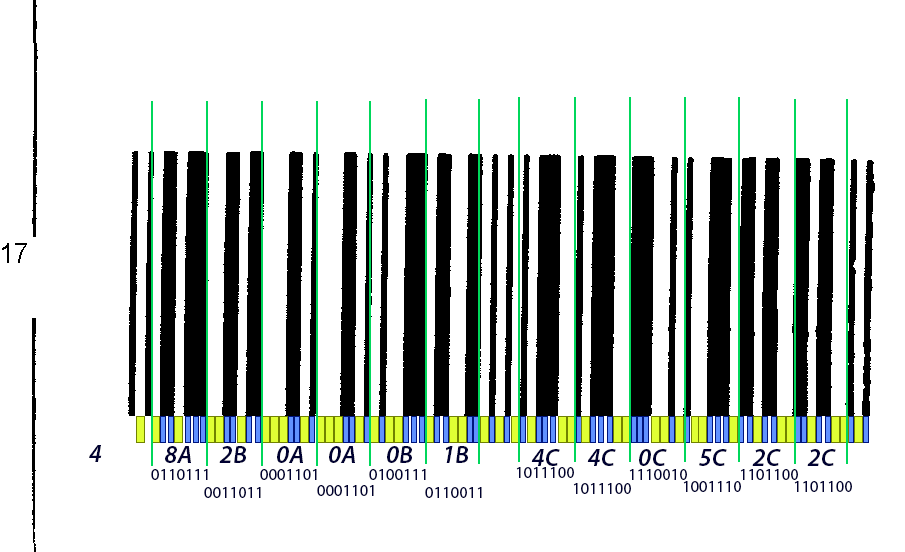
<style>
.page{position:relative;width:905px;height:552px;background:#ffffff}
.page>*{position:absolute;margin:0}
.t1{font:25px "MyriadPro-SemiboldIt";color:#000131}
.t2{font:16.7px "MyriadPro-Regular";color:#000131}
</style>
<div class="page">
<p class="t1" style="left:89px;top:445px;width:13px;height:17px">4</p>
<p class="t1" style="left:165px;top:446px;width:26px;height:17px">8A</p>
<p class="t1" style="left:219px;top:446px;width:27px;height:17px">2B</p>
<p class="t1" style="left:277px;top:446px;width:26px;height:17px">0A</p>
<p class="t1" style="left:329px;top:446px;width:26px;height:17px">0A</p>
<p class="t1" style="left:387px;top:446px;width:25px;height:17px">0B</p>
<p class="t1" style="left:446px;top:446px;width:22px;height:17px">1B</p>
<p class="t1" style="left:531px;top:449px;width:29px;height:17px">4C</p>
<p class="t1" style="left:587px;top:449px;width:29px;height:17px">4C</p>
<p class="t1" style="left:639px;top:449px;width:28px;height:17px">0C</p>
<p class="t1" style="left:699px;top:449px;width:28px;height:17px">5C</p>
<p class="t1" style="left:752px;top:449px;width:29px;height:17px">2C</p>
<p class="t1" style="left:807px;top:449px;width:29px;height:17px">2C</p>
<p class="t2" style="left:151px;top:469px;width:57px;height:11px">0110111</p>
<p class="t2" style="left:260px;top:469px;width:57px;height:11px">0001101</p>
<p class="t2" style="left:369px;top:469px;width:57px;height:11px">0100111</p>
<p class="t2" style="left:516px;top:467px;width:58px;height:11px">1011100</p>
<p class="t2" style="left:629px;top:469px;width:58px;height:11px">1110010</p>
<p class="t2" style="left:740px;top:469px;width:58px;height:11px">1101100</p>
<p class="t2" style="left:317px;top:485px;width:57px;height:11px">0001101</p>
<p class="t2" style="left:573px;top:483px;width:58px;height:11px">1011100</p>
<p class="t2" style="left:683px;top:481px;width:58px;height:11px">1001110</p>
<p class="t2" style="left:794px;top:481px;width:58px;height:11px">1101100</p>
<p class="t2" style="left:204px;top:487px;width:57px;height:11px">0011011</p>
<p class="t2" style="left:425px;top:487px;width:57px;height:11px">0110011</p>
</div>
